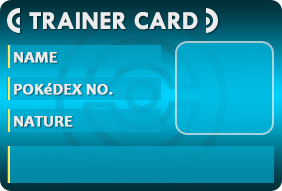
<style>
.page{position:relative;width:282px;height:191px}
.page>*{position:absolute;margin:0}
.t1{font:26px "TwCenMT-Bold";color:#ececec}
.t2{font:16px "Candara-Bold";color:#ececec;font-weight:bold}
</style>
<div class="page">
<p class="t1" style="left:29px;top:12px;width:169px;height:18px">TRAINER CARD</p>
<p class="t2" style="left:14px;top:52px;width:43px;height:11px">NAME</p>
<p class="t2" style="left:14px;top:83px;width:99px;height:12px">POKéDEX NO.</p>
<p class="t2" style="left:14px;top:116px;width:59px;height:11px">NATURE</p>
</div>
